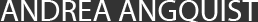
<style>
.page{position:relative;width:258px;height:22px;background:#333333}
.page>*{position:absolute;margin:0}
.t1{font:30px "MyriadWebPro";color:#ffffff;text-transform:uppercase}
</style>
<div class="page">
<p class="t1" style="left:0px;top:0px;width:258px;height:24px">Andrea Angquist</p>
</div>
